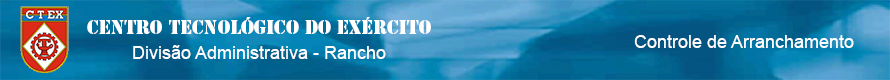
<style>
.page{position:relative;width:890px;height:80px}
.page>*{position:absolute;margin:0}
.t1{font:18px "StencilStd";color:#ffffff}
.t2{font:18px "ArialMT";color:#ffffff}
</style>
<div class="page">
<p class="t1" style="left:87px;top:17px;width:344px;height:17px">Centro Tecnológico do Exército</p>
<p class="t2" style="left:634px;top:35px;width:220px;height:13px">Controle de Arranchamento</p>
<p class="t2" style="left:133px;top:45px;width:253px;height:14px">Divisão Administrativa - Rancho</p>
</div>
